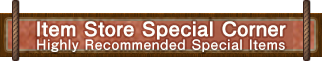
<style>
.page{position:relative;width:322px;height:61px;background:#ffffff}
.page>*{position:absolute;margin:0}
.t1{font:14px/19px "FutoGoB101Pr5-Bold";letter-spacing:0.04em;color:#fffffa}
.t2{font:20px/19px "FutoGoB101Pr5-Bold";color:#fffffa;font-weight:bold}
</style>
<div class="page">
<p class="t1" style="left:37px;top:21px;width:249px;height:31px;text-align:center"><span class="t2">Item Store Special Corner<br></span>Highly Recommended Special Items</p>
</div>
